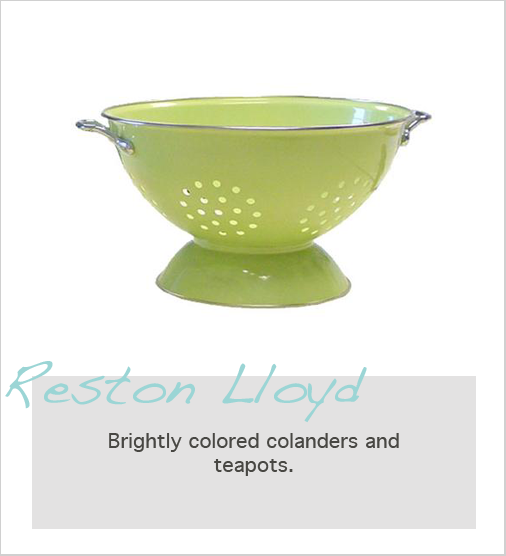
<style>
.page{position:relative;width:506px;height:556px;background:#ffffff}
.page>*{position:absolute;margin:0}
.t1{font:56px "Handwriting-Dakota";color:#9bd5d5}
.t2{font:20px "Geneva";color:#484743}
</style>
<div class="page">
<p class="t1" style="left:5px;top:361px;width:362px;height:62px">Reston Lloyd</p>
<p class="t2" style="left:109px;top:433px;width:290px;height:43px;text-align:center">Brightly colored colanders and <br>teapots.</p>
</div>
